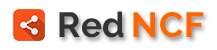
<style>
.page{position:relative;width:217px;height:50px;background:#ffffff}
.page>*{position:absolute;margin:0}
.t1{font:35px "Raleway-Bold";letter-spacing:0.025em;color:#333333}
.t2{font:35px "Raleway-Bold";letter-spacing:0.025em;color:#ff6600}
.t3{font:35px "Raleway-Bold";letter-spacing:0.025em;color:#ffffff}
</style>
<div class="page">
<p class="t1" style="left:59px;top:11px;width:65px;height:27px">Red</p>
<p class="t2" style="left:133px;top:12px;width:71px;height:26px"><span class="t3">        </span>NCF</p>
</div>
